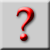
<style>
.page{position:relative;width:50px;height:50px;background:#cccccc}
.page>*{position:absolute;margin:0}
.t1{font:48px "BookAntiqua-Bold"}
</style>
<div class="page">
<p class="t1" style="left:16px;top:7px;width:18px;height:34px">?</p>
</div>
